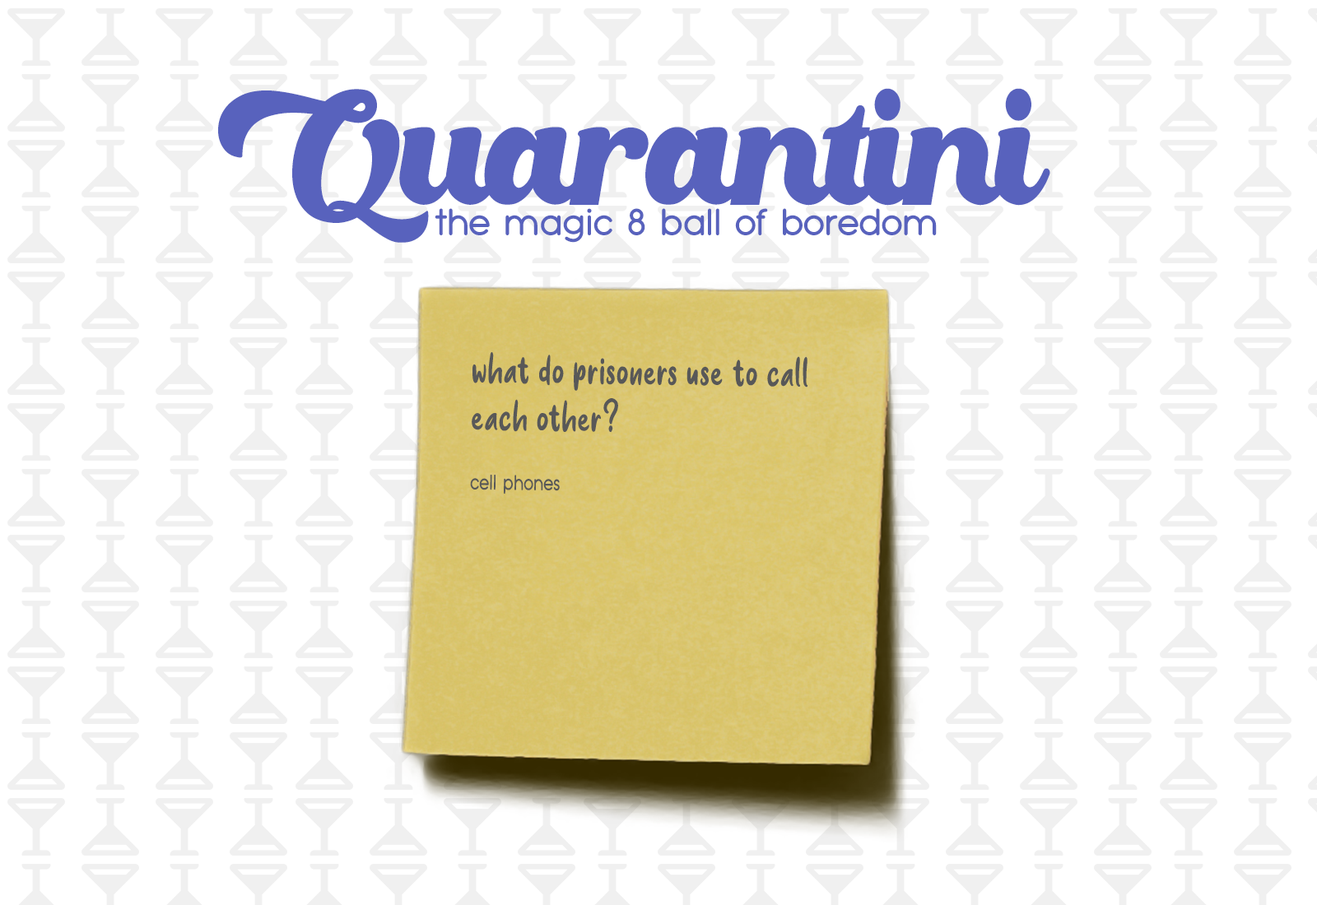
<style>
.page{position:relative;width:1317px;height:905px;background:#ffffff}
.page>*{position:absolute;margin:0}
.t1{font:154.3px "Oaklash";letter-spacing:-0.05em;color:#5862bd;scale:0.8 1}
.t2{font:36.2px "TypoGroteskRounded";color:#5862bd}
.t3{font:49.4px "sweetpurple";letter-spacing:0.01em;color:#585858;scale:0.8 1}
.t4{font:20.6px "TypoGroteskRounded";letter-spacing:0.01em;color:#585858;scale:0.8 1}
</style>
<div class="page">
<p class="t1" style="left:218px;top:88px;width:832px;height:155px">Quarantini</p>
<p class="t2" style="left:435px;top:208px;width:502px;height:35px">the magic 8 ball of boredom</p>
<p class="t3" style="left:470px;top:352px;width:338px;height:143px;rotate:1deg">what do prisoners use to call each other?<br><span class="t4"><br><br>cell phones</span></p>
</div>
